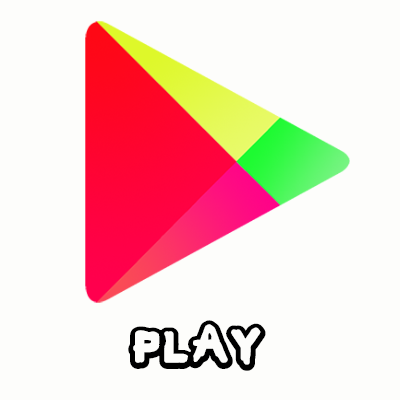
<style>
.page{position:relative;width:400px;height:400px;background:#fdfdfb}
.page>*{position:absolute;margin:0}
.t1{font:70.5px "The-Kids-Mraker-Regular";color:#000000}
</style>
<div class="page">
<p class="t1" style="left:128px;top:320px;width:138px;height:51px">Play</p>
</div>
